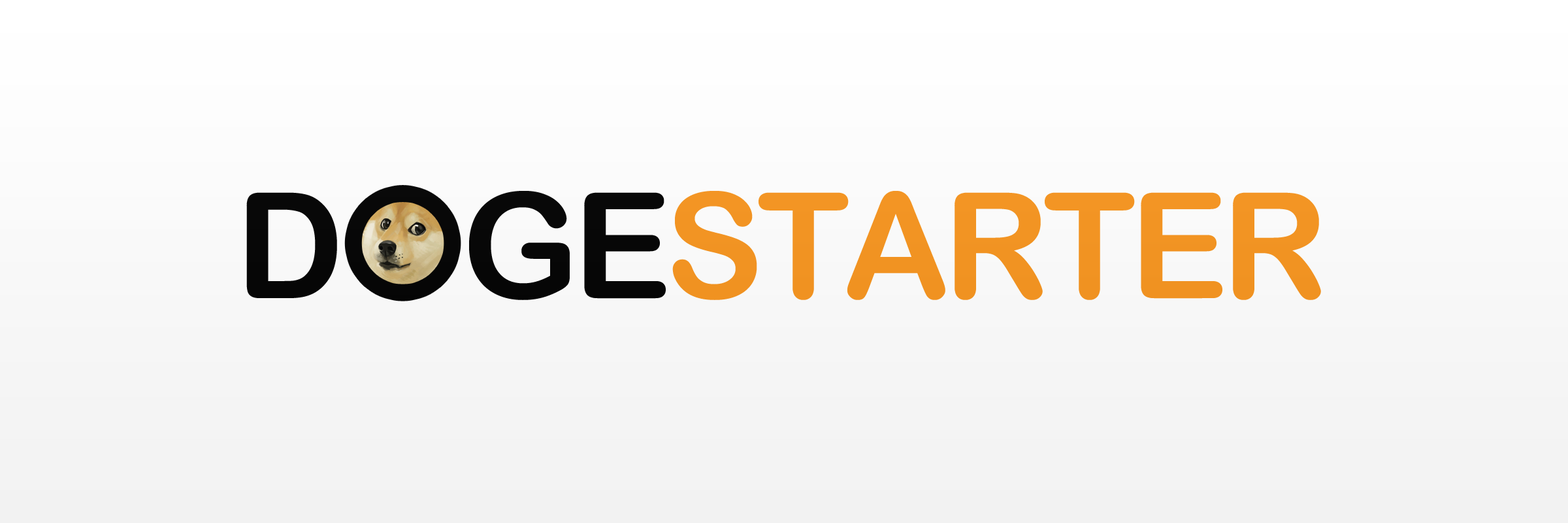
<style>
.page{position:relative;width:1568px;height:523px}
.page>*{position:absolute;margin:0}
.t1{font:147.2px "ArialRoundedMTBold";letter-spacing:-0.04em;color:#000000}
.t2{font:147.2px "ArialRoundedMTBold";letter-spacing:-0.04em;color:#f7941d}
</style>
<div class="page">
<p class="t1" style="left:246px;top:191px;width:1075px;height:109px">D    GE<span class="t2">STARTER</span></p>
</div>
